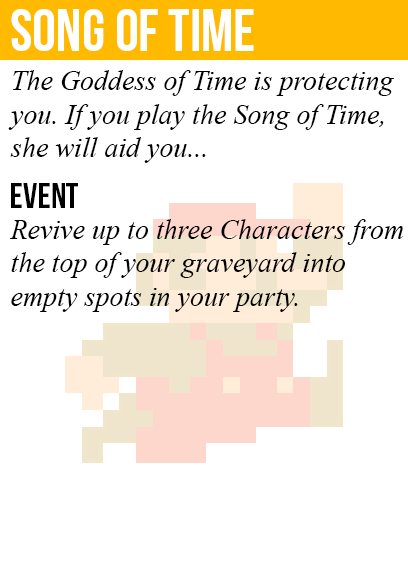
<style>
.page{position:relative;width:408px;height:585px;background:#ffffff}
.page>*{position:absolute;margin:0}
.t1{font:60px "BebasNeue";color:#ffffff}
.t2{font:28px "TimesNewRomanPS-ItalicMT";color:#000000}
.t3{font:36px "BebasNeue";color:#000000}
</style>
<div class="page">
<p class="t1" style="left:11px;top:9px;width:243px;height:42px">song of time</p>
<p class="t2" style="left:8px;top:70px;width:386px;height:93px">The Goddess of Time is protecting<br>you. If you play the Song of Time,<br>she will aid you...</p>
<p class="t3" style="left:11px;top:183px;width:67px;height:25px">event</p>
<p class="t2" style="left:10px;top:219px;width:393px;height:93px">Revive up to three Characters from<br>the top of your graveyard into<br>empty spots in your party.</p>
</div>
